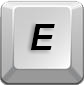
<style>
.page{position:relative;width:84px;height:85px}
.page>*{position:absolute;margin:0}
.t1{font:36px "Arial-BoldItalicMT";letter-spacing:-0.007em;color:#000000}
</style>
<div class="page">
<p class="t1" style="left:30px;top:24px;width:25px;height:26px">E</p>
</div>
